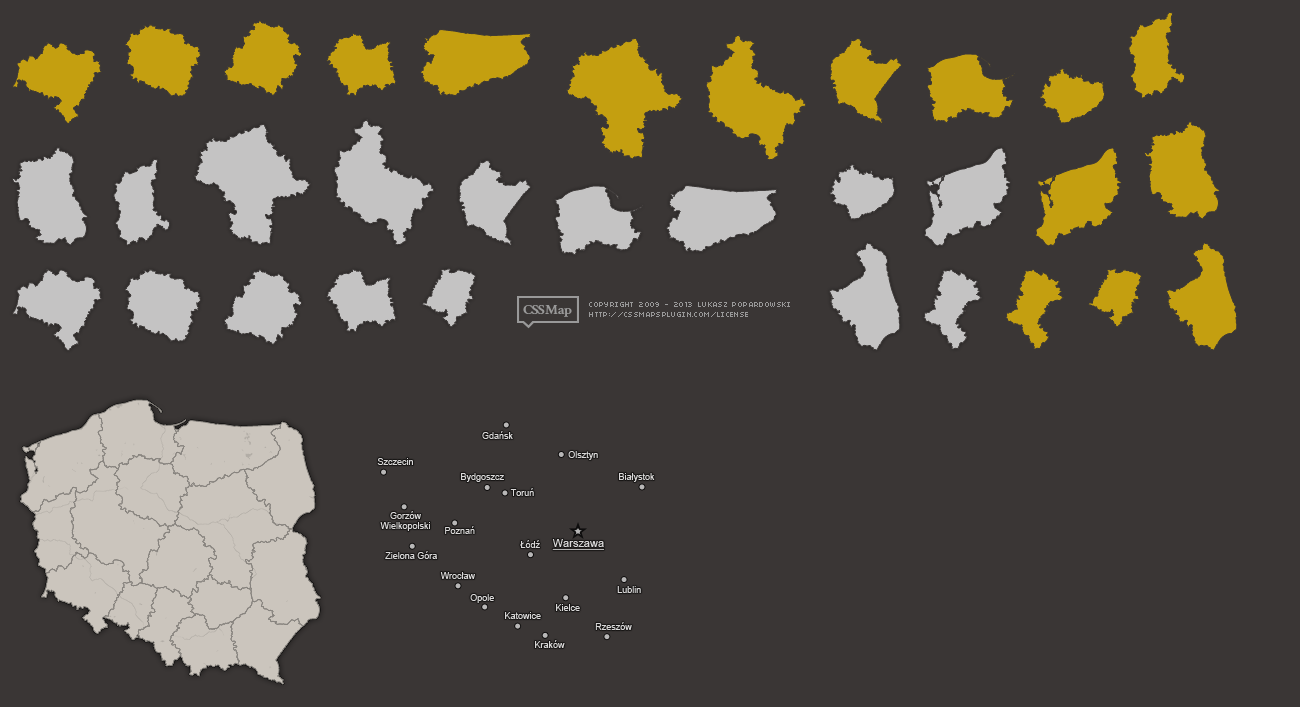
<style>
.page{position:relative;width:1300px;height:707px;background:#3a3635}
.page>*{position:absolute;margin:0}
.t1{font:9px "ArialMT";color:#d8d7d7}
.t2{font:11px "ArialMT";color:#d8d7d7;text-decoration:underline}
</style>
<div class="page">
<p class="t1" style="left:482px;top:431px;width:31px;height:8px">Gdańsk</p>
<p class="t1" style="left:377px;top:458px;width:36px;height:7px">Szczecin</p>
<p class="t1" style="left:568px;top:451px;width:30px;height:9px">Olsztyn</p>
<p class="t1" style="left:461px;top:473px;width:43px;height:9px">Bydgoszcz</p>
<p class="t1" style="left:619px;top:473px;width:36px;height:9px">Białystok</p>
<p class="t1" style="left:510px;top:488px;width:24px;height:8px">Toruń</p>
<p class="t1" style="left:380px;top:511px;width:50px;height:20px;text-align:center">Gorzów<br>Wielkopolski</p>
<p class="t1" style="left:445px;top:526px;width:30px;height:8px">Poznań</p>
<p class="t1" style="left:520px;top:540px;width:20px;height:8px">Łódź</p>
<p class="t2" style="left:552px;top:539px;width:53px;height:11px">Warszawa</p>
<p class="t1" style="left:385px;top:551px;width:52px;height:8px">Zielona Góra</p>
<p class="t1" style="left:440px;top:572px;width:35px;height:7px">Wrocław</p>
<p class="t1" style="left:617px;top:586px;width:24px;height:7px">Lublin</p>
<p class="t1" style="left:470px;top:594px;width:24px;height:9px">Opole</p>
<p class="t1" style="left:556px;top:604px;width:24px;height:7px">Kielce</p>
<p class="t1" style="left:505px;top:612px;width:36px;height:7px">Katowice</p>
<p class="t1" style="left:595px;top:622px;width:37px;height:8px">Rzeszów</p>
<p class="t1" style="left:535px;top:640px;width:30px;height:8px">Kraków</p>
</div>
